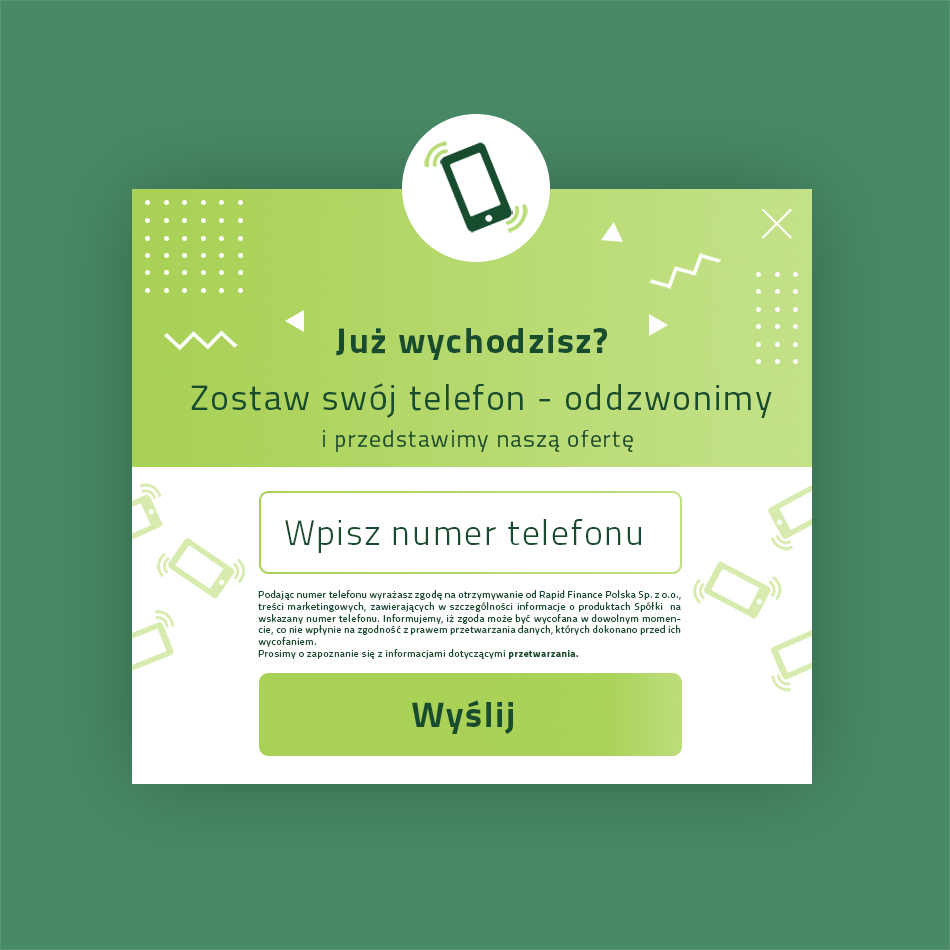
<style>
.page{position:relative;width:950px;height:950px;background:#488a66}
.page>*{position:absolute;margin:0}
.t1{font:35.6px "Titillium-Bold";letter-spacing:0.05em;color:#174c2e}
.t2{font:35.6px "Titillium-Regular";letter-spacing:0.05em;color:#174c2e}
.t3{font:23.8px "Titillium-Regular";letter-spacing:0.05em;color:#174c2e}
.t4{font:35.6px "Titillium-Light";letter-spacing:0.05em;color:#174c2e}
.t5{font:9.9px "Titillium-Regular";letter-spacing:0.05em;color:#174c2e}
.t6{font:9.9px "Titillium-Bold";letter-spacing:0.05em;color:#174c2e}
</style>
<div class="page">
<p class="t1" style="left:336px;top:328px;width:271px;height:32px">Już wychodzisz?</p>
<p class="t2" style="left:191px;top:383px;width:581px;height:35px">Zostaw swój telefon - oddzwonimy</p>
<p class="t3" style="left:323px;top:430px;width:310px;height:22px">i przedstawimy naszą ofertę</p>
<p class="t4" style="left:285px;top:519px;width:356px;height:34px">Wpisz numer telefonu</p>
<p class="t5" style="left:258px;top:590px;width:423px;height:57px;text-align:justify">Podając numer telefonu wyrażasz zgodę na otrzymywanie od Rapid Finance Polska Sp. z o.o., treści marketingowych, zawierających w szczególności informacje o produktach Spółki  na wskazany numer telefonu. Informujemy, iż zgoda może być wycofana w dowolnym momencie, co nie wpłynie na zgodność z prawem przetwarzania danych, których dokonano przed ich wycofaniem.</p>
<p class="t5" style="left:258px;top:649px;width:320px;height:10px">Prosimy o zapoznanie się z informacjami dotyczącymi <span class="t6">przetwarzania.</span></p>
<p class="t1" style="left:412px;top:700px;width:101px;height:34px">Wyślij</p>
</div>
